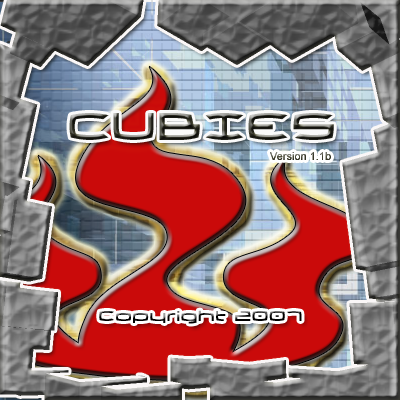
<style>
.page{position:relative;width:400px;height:400px}
.page>*{position:absolute;margin:0}
.t1{font:48px "ThundergodII"}
.t2{font:11px "ArialMT"}
.t3{font:18px "ThundergodII"}
</style>
<div class="page">
<p class="t1" style="left:69px;top:113px;width:265px;height:27px">CUBIES</p>
<p class="t2" style="left:270px;top:152px;width:61px;height:8px">Version 1.1b</p>
<p class="t3" style="left:99px;top:310px;width:203px;height:14px">Copyright 2007</p>
</div>
